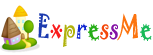
<style>
.page{position:relative;width:153px;height:55px;background:#ffffff}
.page>*{position:absolute;margin:0}
.t1{font:28.8px "Jokerman-Regular";color:#1c3baf;scale:0.75 1}
.t2{font:28.8px "Jokerman-Regular";color:#f91b1b;scale:0.75 1}
.t3{font:28.8px "Jokerman-Regular";color:#b0b20d;scale:0.75 1}
.t4{font:28.8px "Jokerman-Regular";color:#0d24d0;scale:0.75 1}
.t5{font:28.8px "Jokerman-Regular";color:#25ad16;scale:0.75 1}
.t6{font:28.8px "Jokerman-Regular";color:#f4480c;scale:0.75 1}
.t7{font:28.8px "Jokerman-Regular";color:#8411a5;scale:0.75 1}
.t8{font:28.8px "Jokerman-Regular";color:#fc7410;scale:0.75 1}
.t9{font:28.8px "Jokerman-Regular";color:#17ba58;scale:0.75 1}
</style>
<div class="page">
<p class="t1" style="left:38px;top:13px;width:114px;height:34px">E<span class="t2">x</span><span class="t3">p</span><span class="t4">r</span><span class="t5">e</span><span class="t6">s</span><span class="t7">s</span><span class="t8">M</span><span class="t9">e</span></p>
</div>
